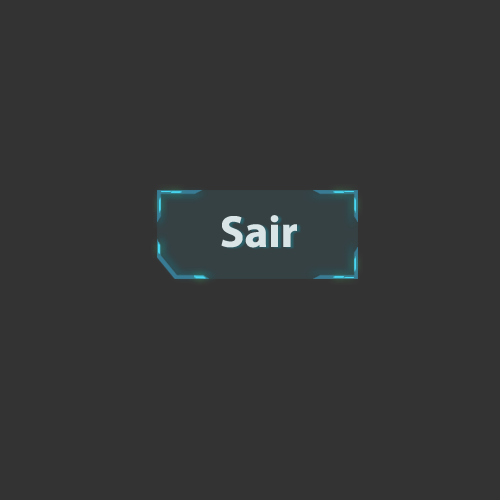
<style>
.page{position:relative;width:500px;height:500px;background:#333333}
.page>*{position:absolute;margin:0}
.t1{font:44.9px "MyriadPro-Bold";color:#d8e4e6}
</style>
<div class="page">
<p class="t1" style="left:221px;top:215px;width:76px;height:33px;text-align:center">Sair<br><br><br><br>e</p>
</div>
